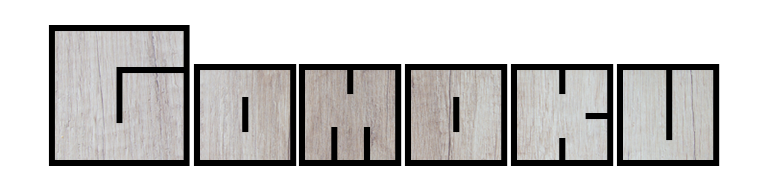
<style>
.page{position:relative;width:768px;height:192px;background:#ffffff}
.page>*{position:absolute;margin:0}
.t1{font:192px "Transuranium";letter-spacing:0.05em;color:#000000}
</style>
<div class="page">
<p class="t1" style="left:48px;top:25px;width:672px;height:141px">Gomoku</p>
</div>
